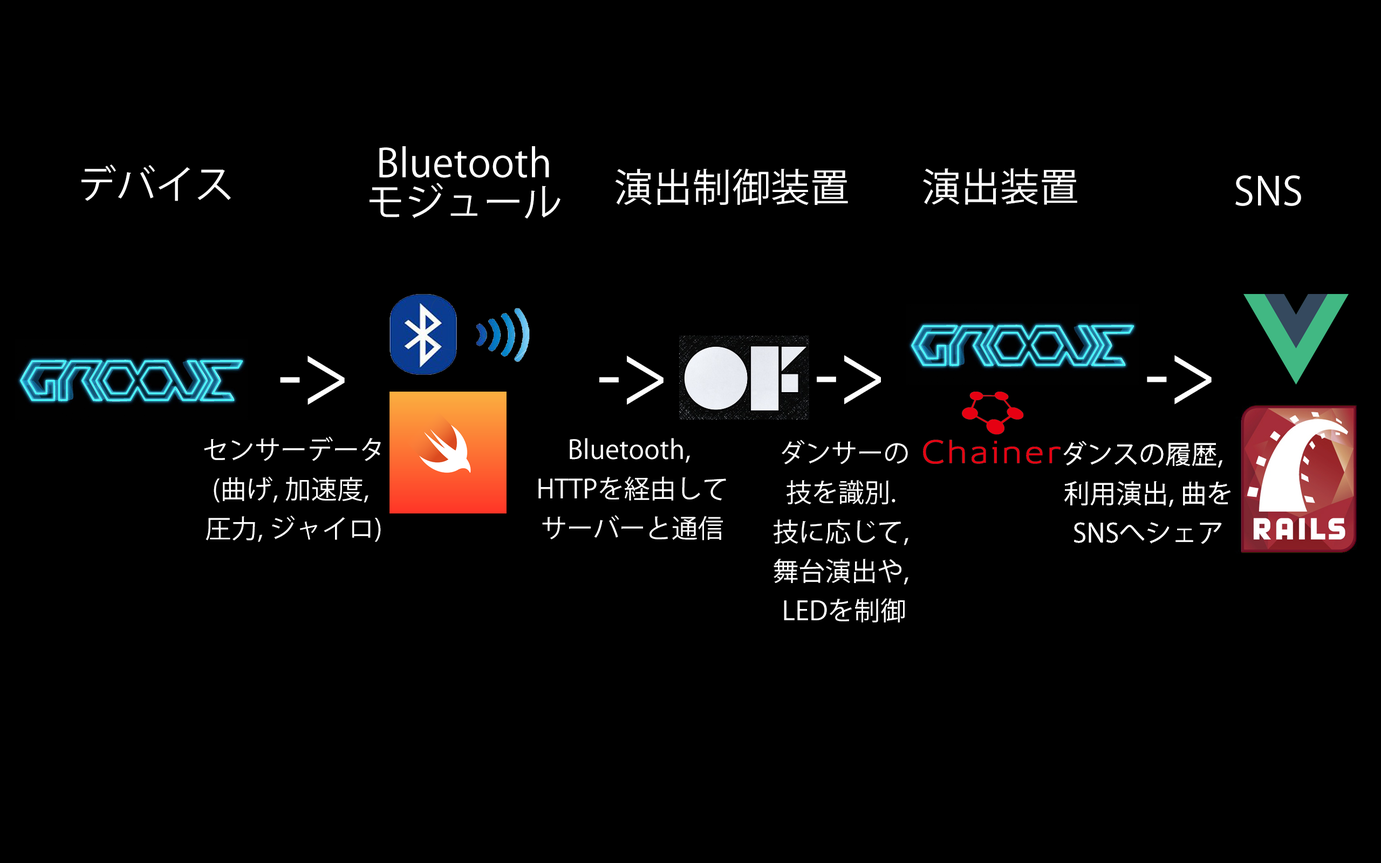
<style>
.page{position:relative;width:1381px;height:863px;background:#000000}
.page>*{position:absolute;margin:0}
.t1{font:38.8px/39.4px "KozGoPr6N-Regular";letter-spacing:0.01em;color:#ffffff}
.t2{font:38.8px "KozGoPr6N-Regular";letter-spacing:0.01em;color:#ffffff}
.t3{font:38.9px "KozGoPr6N-Regular";letter-spacing:0.01em;color:#ffffff}
.t4{font:80.9px "KozGoPr6N-Regular";letter-spacing:0.01em;color:#ffffff;scale:0.87 1}
.t5{font:25.9px/39.4px "KozGoPr6N-Regular";letter-spacing:0.01em;color:#ffffff}
</style>
<div class="page">
<p class="t1" style="left:370px;top:146px;width:191px;height:73px;text-align:center">Bluetooth<br>モジュール</p>
<p class="t2" style="left:81px;top:165px;width:150px;height:36px">デバイス</p>
<p class="t2" style="left:615px;top:168px;width:233px;height:37px">演出制御装置</p>
<p class="t2" style="left:923px;top:168px;width:154px;height:37px">演出装置</p>
<p class="t3" style="left:1236px;top:175px;width:65px;height:31px">SNS</p>
<p class="t4" style="left:280px;top:356px;width:65px;height:49px">-&gt;</p>
<p class="t4" style="left:599px;top:356px;width:65px;height:49px">-&gt;</p>
<p class="t4" style="left:817px;top:355px;width:64px;height:50px">-&gt;</p>
<p class="t4" style="left:1147px;top:355px;width:65px;height:50px">-&gt;</p>
<p class="t5" style="left:204px;top:437px;width:177px;height:105px;text-align:center">センサーデータ<br>(曲げ, 加速度, <br>圧力, ジャイロ)</p>
<p class="t5" style="left:538px;top:438px;width:188px;height:103px;text-align:center">Bluetooth, <br>HTTPを経由して<br>サーバーと通信</p>
<p class="t5" style="left:774px;top:440px;width:135px;height:183px;text-align:center">ダンサーの<br>技を識別. <br>技に応じて, <br>舞台演出や, <br>LEDを制御</p>
<p class="t5" style="left:1063px;top:441px;width:168px;height:103px;text-align:center">ダンスの履歴,  <br>利用演出, 曲を<br>SNSへシェア</p>
</div>
